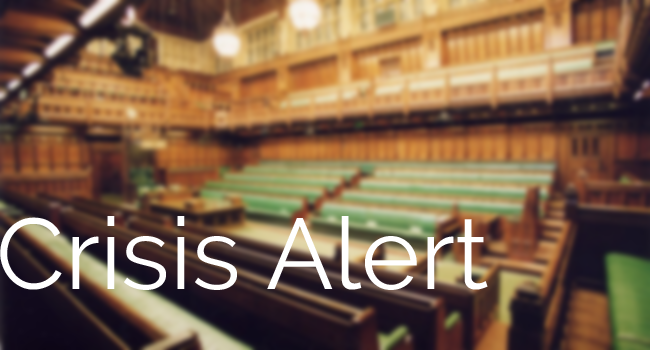
<style>
.page{position:relative;width:650px;height:350px}
.page>*{position:absolute;margin:0}
.t1{font:100px "Raleway-Regular";color:#ffffff}
</style>
<div class="page">
<p class="t1" style="left:0px;top:216px;width:488px;height:74px">Crisis Alert</p>
</div>
